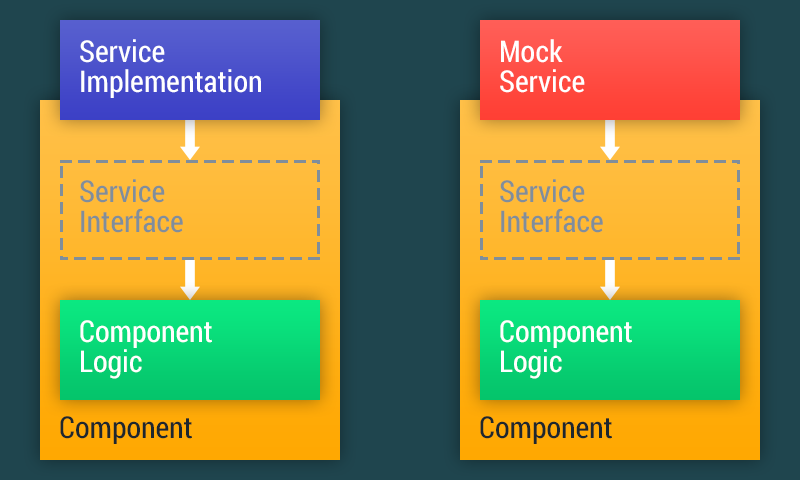
<style>
.page{position:relative;width:800px;height:480px}
.page>*{position:absolute;margin:0}
.t1{font:30px/20px "RobotoCondensed-Regular";color:#ffffff}
.t2{font:30px/20px "RobotoCondensed-Regular";color:#808e9b}
.t3{font:30px "RobotoCondensed-Regular";color:#1e272e}
</style>
<div class="page">
<p class="t1" style="left:80px;top:39px;width:181px;height:59px">Service<br>Implementation</p>
<p class="t1" style="left:500px;top:39px;width:85px;height:54px">Mock<br>Service</p>
<p class="t2" style="left:80px;top:179px;width:103px;height:54px">Service<br>Interface</p>
<p class="t2" style="left:500px;top:179px;width:103px;height:54px">Service<br>Interface</p>
<p class="t1" style="left:80px;top:320px;width:132px;height:59px">Component<br>Logic</p>
<p class="t1" style="left:500px;top:320px;width:132px;height:59px">Component<br>Logic</p>
<p class="t3" style="left:60px;top:416px;width:132px;height:28px">Component</p>
<p class="t3" style="left:480px;top:416px;width:132px;height:28px">Component</p>
</div>
